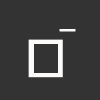
<style>
.page{position:relative;width:100px;height:100px;background:#333333}
.page>*{position:absolute;margin:0}
.t1{font:30px "CopperplateGothic-Light";color:#fdfafa;font-weight:bold}
</style>
<div class="page">
<p class="t1" style="left:59px;top:29px;width:17px;height:3px">_</p>
</div>
